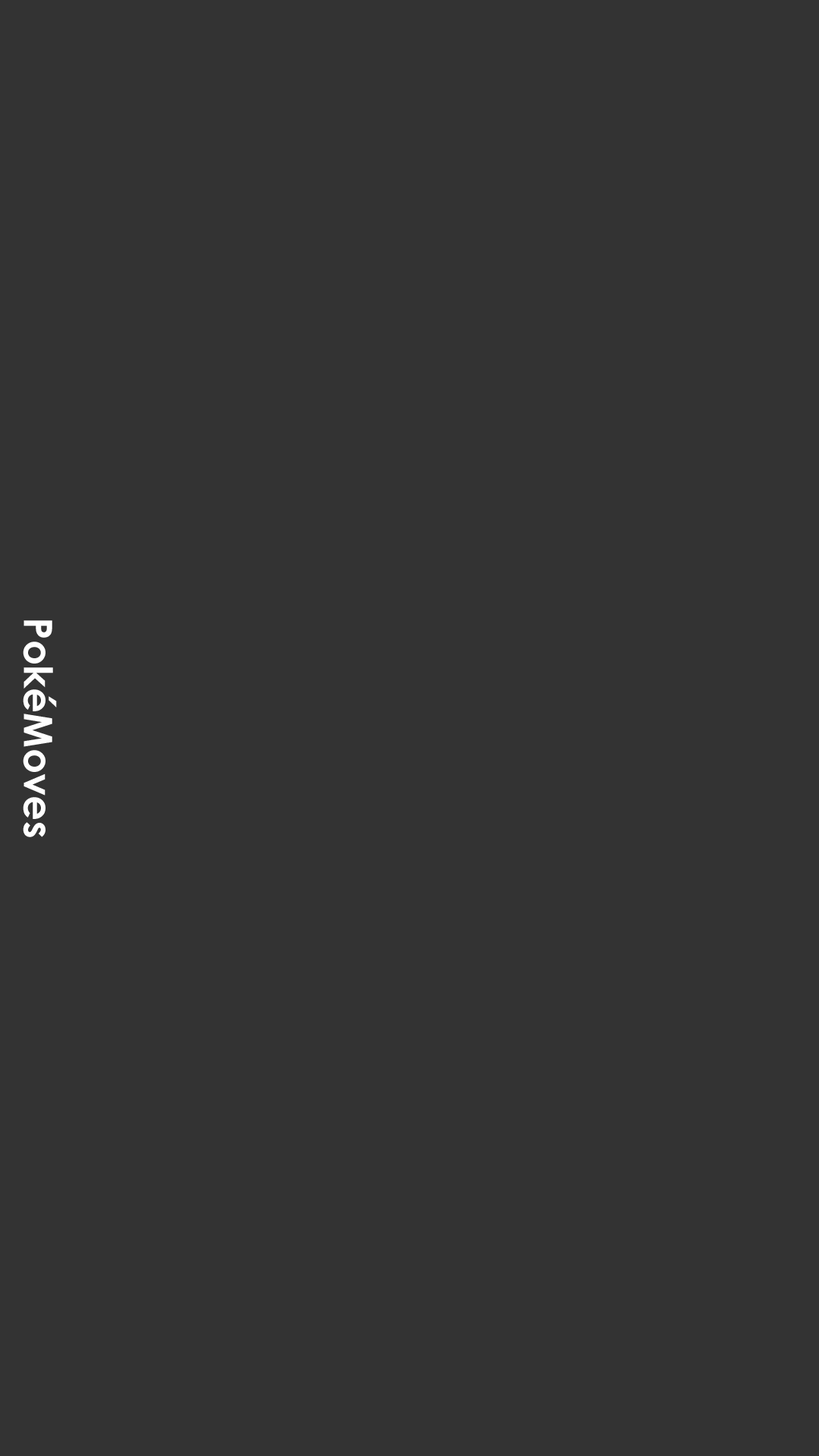
<style>
.page{position:relative;width:819px;height:1456px;background:#333333}
.page>*{position:absolute;margin:0}
.t1{font:39.4px "CenturyGothic-Bold";color:#ffffff}
</style>
<div class="page">
<p class="t1" style="left:23px;top:620px;width:34px;height:217px;rotate:90deg">PokéMoves</p>
</div>
